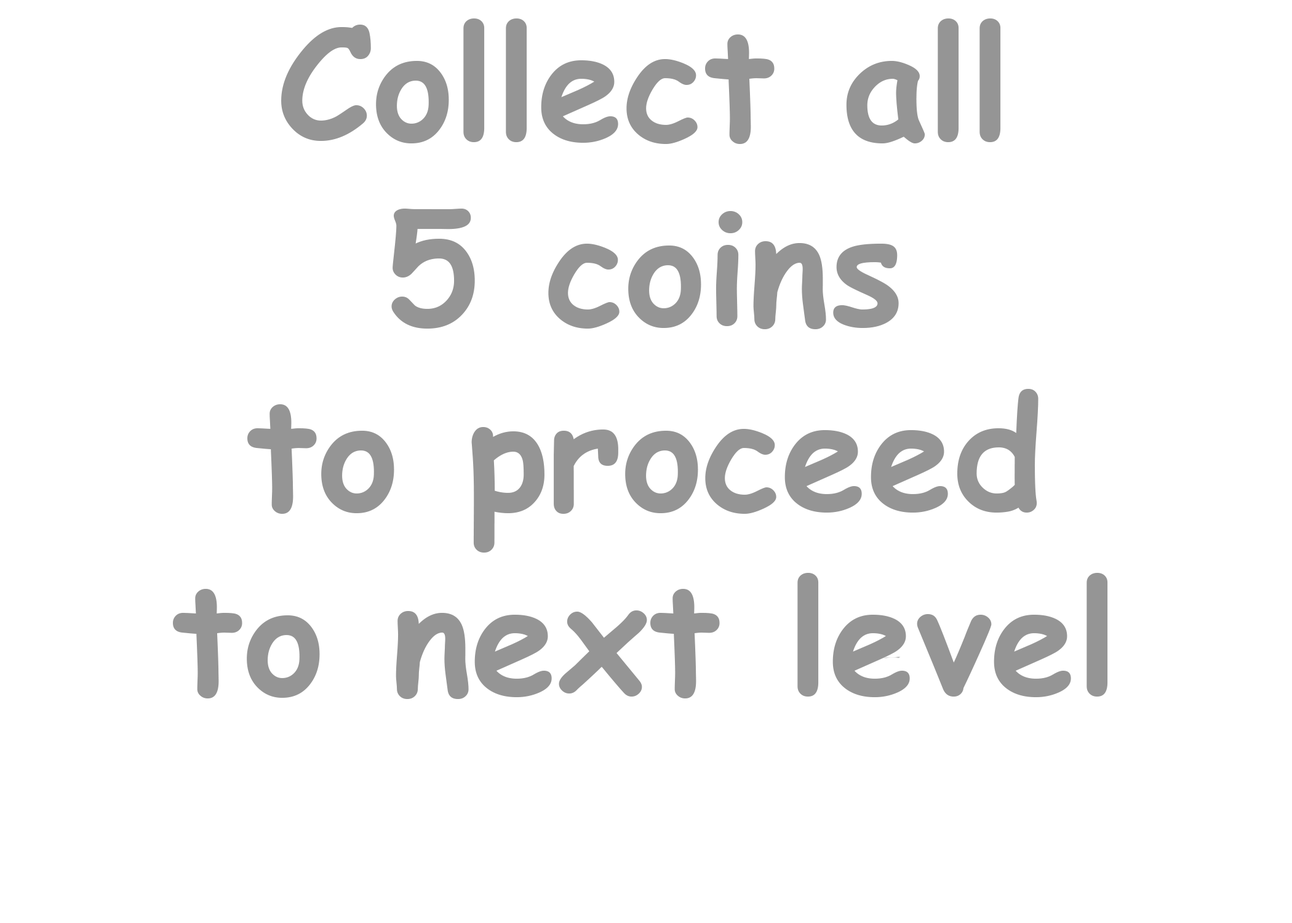
<style>
.page{position:relative;width:1292px;height:923px;background:#ffffff}
.page>*{position:absolute;margin:0}
.t1{font:153.8px "ComicSansMS-Bold";color:#959595}
</style>
<div class="page">
<p class="t1" style="left:173px;top:18px;width:935px;height:681px;text-align:center">Collect all<br>5 coins<br>to proceed<br>to next level</p>
</div>
